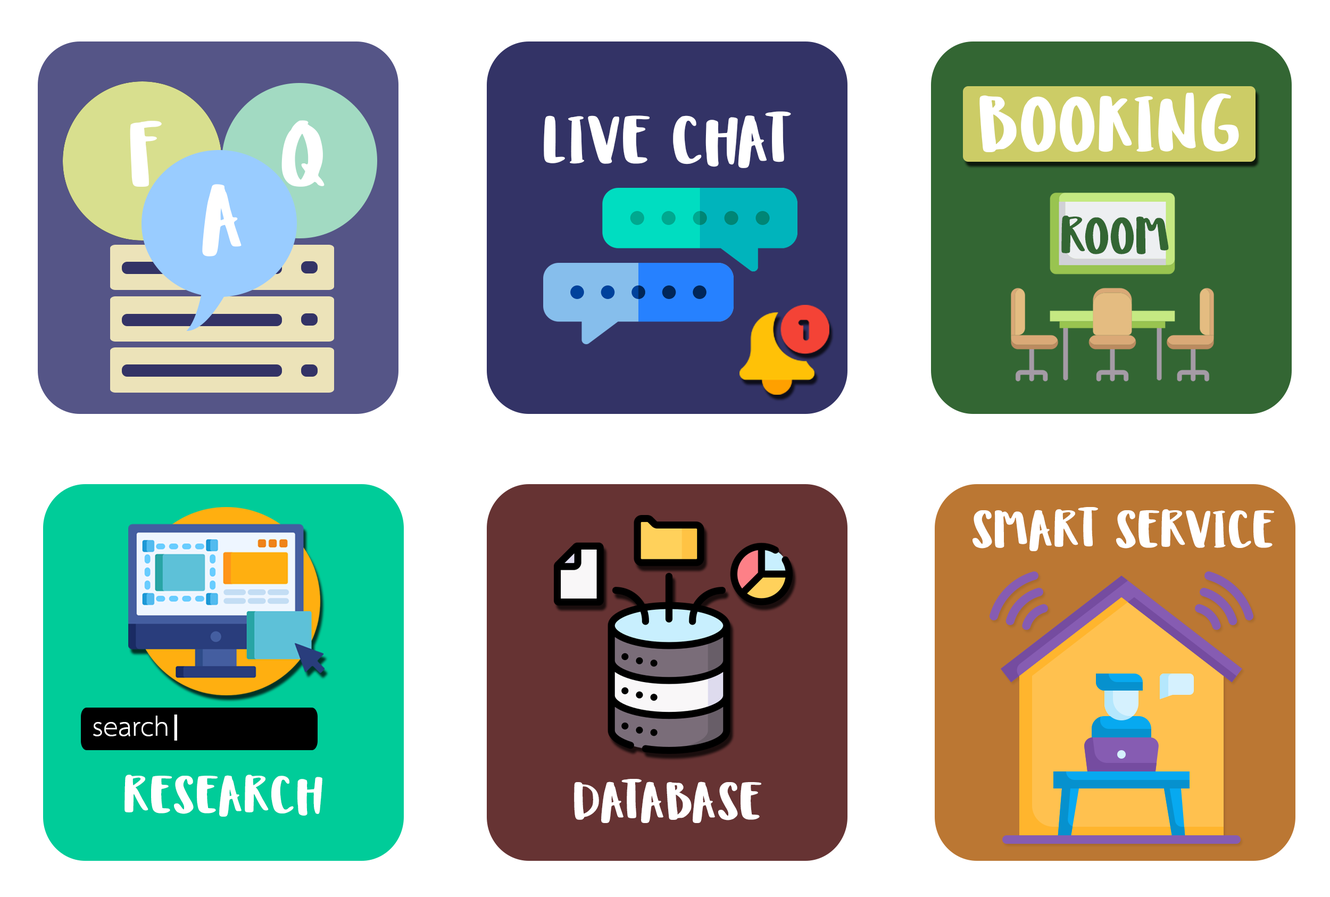
<style>
.page{position:relative;width:1330px;height:897px;background:#ffffff}
.page>*{position:absolute;margin:0}
.t1{font:79.8px "Ludicrous";color:#ffffff}
.t2{font:67.9px "Ludicrous";color:#ffffff}
.t3{font:93.1px "Ludicrous";color:#ffffff}
.t4{font:53.2px "Ludicrous";color:#336633}
.t5{font:53.2px "Ludicrous";color:#ffffff}
.t6{font:39.9px "THSarabunNew";color:#ffffff}
.t7{font:28.5px "TimesNewRomanPSMT";color:#ffffff;scale:2.33 1}
</style>
<div class="page">
<p class="t1" style="left:979px;top:93px;width:260px;height:59px">BOOKING</p>
<p class="t2" style="left:544px;top:111px;width:247px;height:57px">LIVE CHAT</p>
<p class="t3" style="left:130px;top:121px;width:32px;height:66px">F</p>
<p class="t3" style="left:281px;top:120px;width:43px;height:67px">Q</p>
<p class="t3" style="left:202px;top:184px;width:39px;height:72px">A</p>
<p class="t4" style="left:1061px;top:215px;width:108px;height:39px">ROOM</p>
<p class="t5" style="left:972px;top:507px;width:302px;height:44px">SMART SERVICE</p>
<p class="t6" style="left:93px;top:715px;width:75px;height:21px">search</p>
<p class="t7" style="left:174px;top:714px;width:3px;height:26px">|</p>
<p class="t5" style="left:124px;top:774px;width:198px;height:42px">RESEARCH</p>
<p class="t5" style="left:574px;top:779px;width:187px;height:44px">DATABASE</p>
</div>
